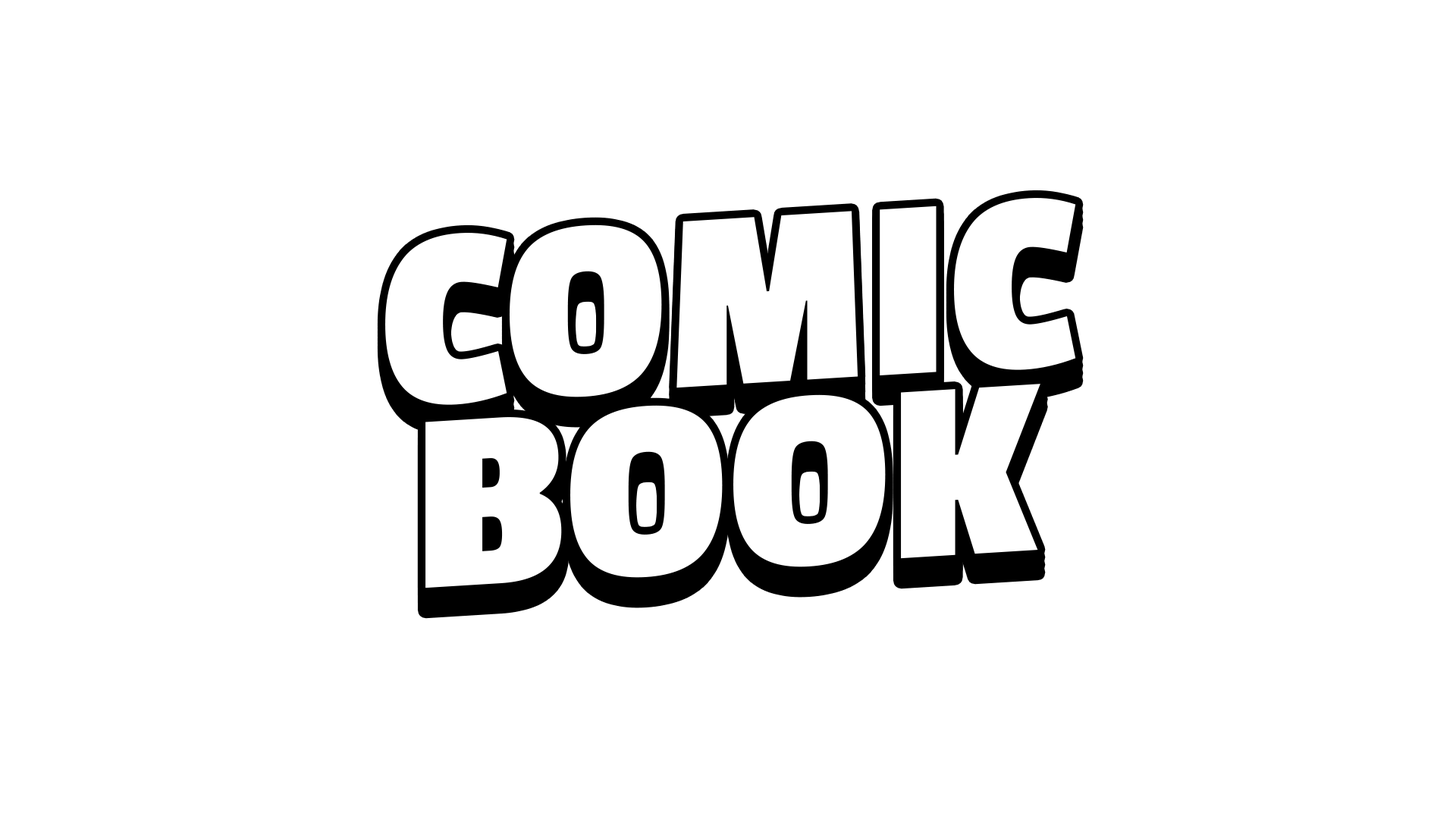
<style>
.page{position:relative;width:1456px;height:819px;background:#ffffff}
.page>*{position:absolute;margin:0}
.t1{font:267px "PassionOne-Bold";color:#ffffff}
</style>
<div class="page">
<p class="t1" style="left:385px;top:198px;width:691px;height:207px;rotate:-4deg">COMIC</p>
<p class="t1" style="left:425px;top:384px;width:615px;height:204px;rotate:-4deg">BOOK</p>
</div>
